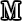
<style>
.page{position:relative;width:22px;height:21px;background:#ffffff}
.page>*{position:absolute;margin:0}
.t1{font:22px "RyuminPro-ExBold";letter-spacing:-0.08em;color:#ffffff;scale:0.9 1}
</style>
<div class="page">
<p class="t1" style="left:2px;top:2px;width:18px;height:17px">M</p>
</div>
